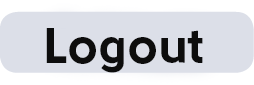
<style>
.page{position:relative;width:254px;height:85px;background:#dcdfe8}
.page>*{position:absolute;margin:0}
.t1{font:50px "Solomon-Sans-Bold";color:#0d0d0d}
</style>
<div class="page">
<p class="t1" style="left:46px;top:28px;width:157px;height:45px">Logout</p>
</div>
